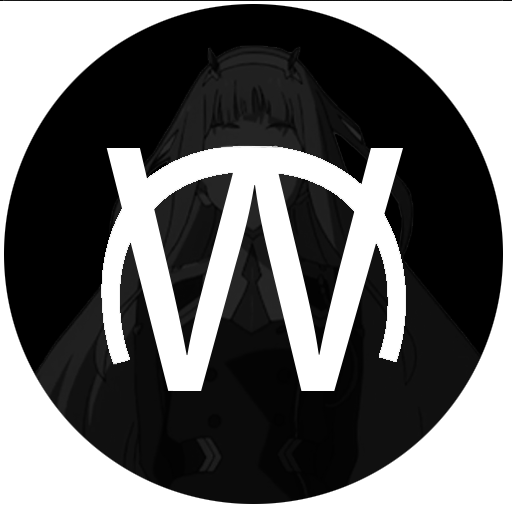
<style>
.page{position:relative;width:512px;height:512px;background:#ffffff}
.page>*{position:absolute;margin:0}
.t1{font:360px "MyriadPro-Regular";color:#ffffff}
</style>
<div class="page">
<p class="t1" style="left:106px;top:147px;width:297px;height:243px">W</p>
</div>
